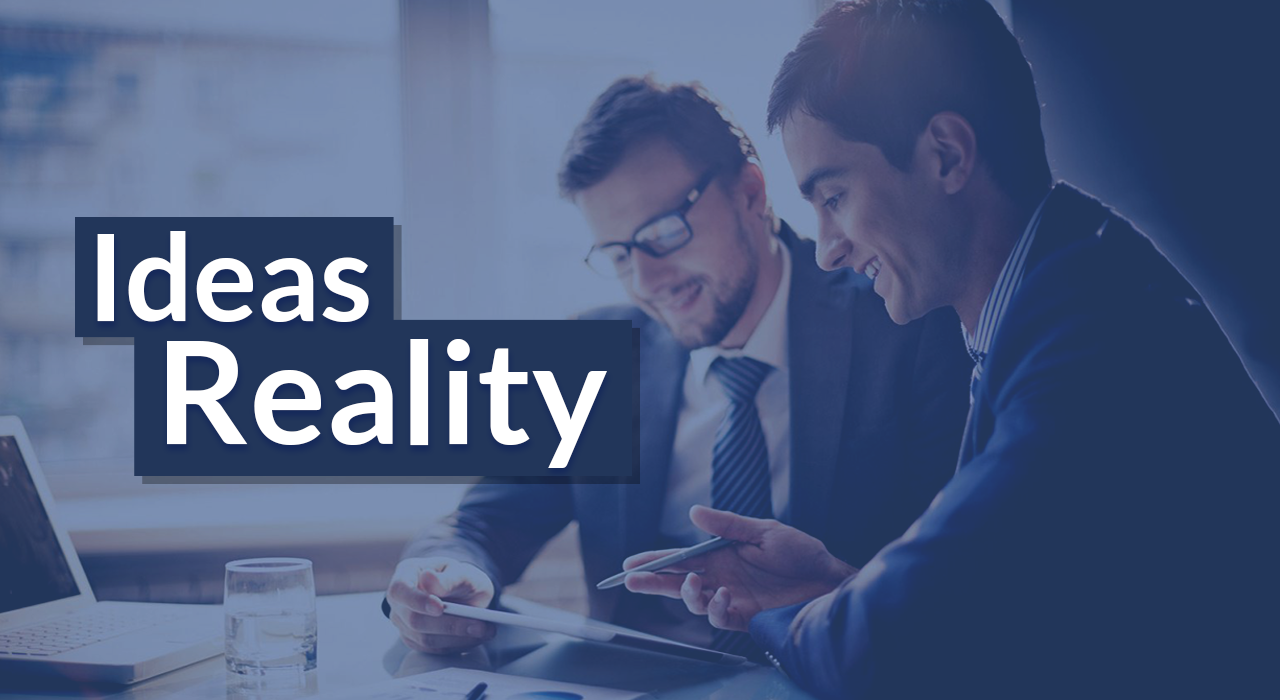
<style>
.page{position:relative;width:1280px;height:700px;background:#22365a}
.page>*{position:absolute;margin:0}
.t1{font:142.4px/123.5px "Lato-Bold";color:#ffffff}
.t2{font:119.9px/123.5px "Lato-Bold";color:#ffffff}
</style>
<div class="page">
<p class="t1" style="left:97px;top:231px;width:510px;height:237px"><span class="t2">Ideas<br>  </span>Reality</p>
</div>
